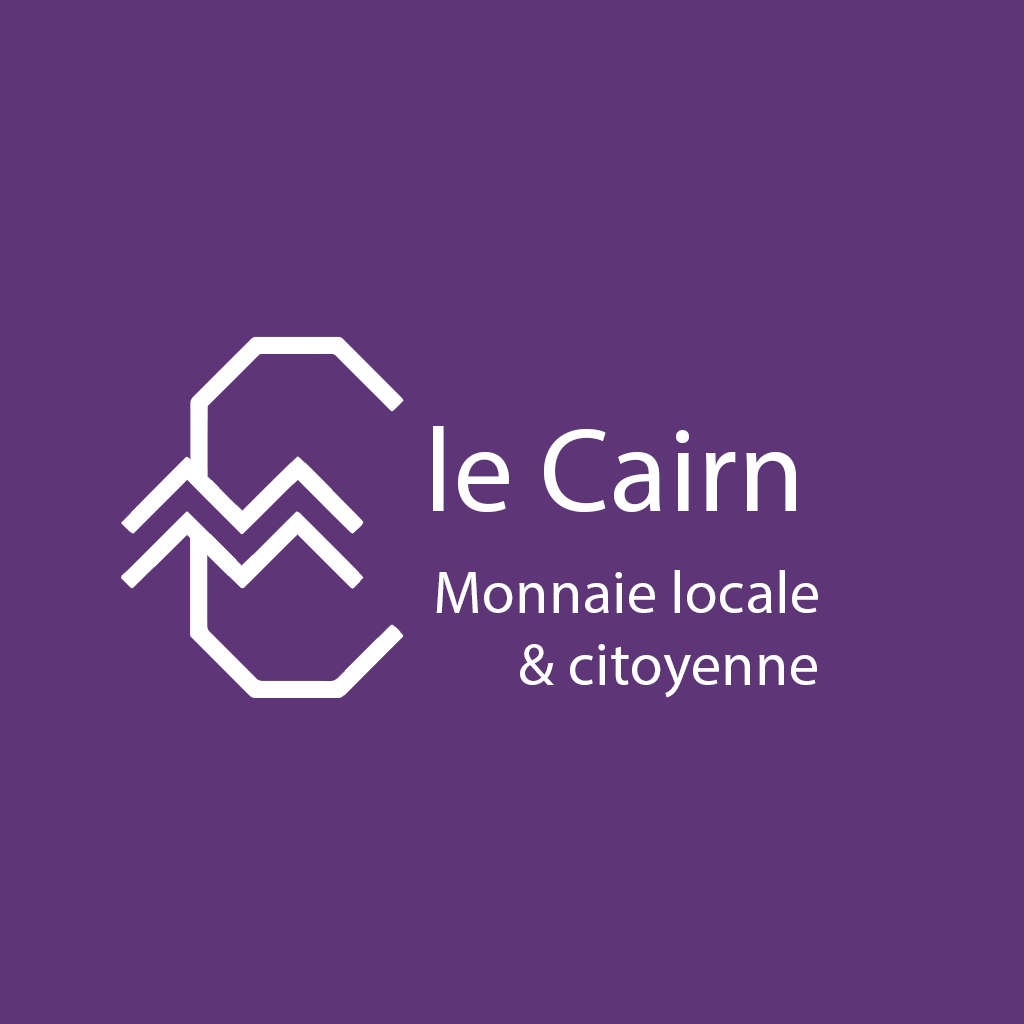
<style>
.page{position:relative;width:1024px;height:1024px;background:#5e3678}
.page>*{position:absolute;margin:0}
.t1{font:120px "MyriadPro-Regular";letter-spacing:0.008em;color:#ffffff}
.t2{font:60px "MyriadPro-Regular";letter-spacing:0.008em;color:#ffffff}
</style>
<div class="page">
<p class="t1" style="left:433px;top:426px;width:363px;height:86px">le Cairn</p>
<p class="t2" style="left:436px;top:570px;width:382px;height:128px">Monnaie locale <br>   &amp; citoyenne</p>
</div>
